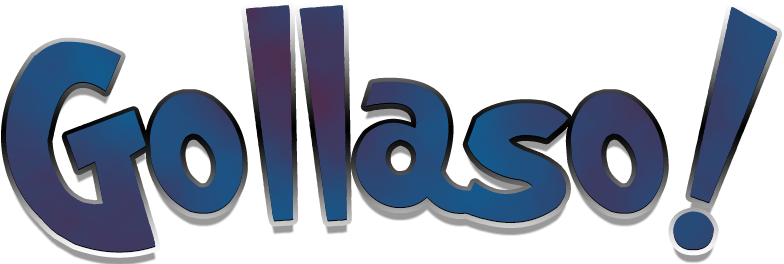
<style>
.page{position:relative;width:784px;height:264px;background:#ffffff}
.page>*{position:absolute;margin:0}
.t1{font:250px "Grinched";color:#2f4570}
</style>
<div class="page">
<p class="t1" style="left:6px;top:6px;width:771px;height:247px">Gollaso!</p>
</div>
